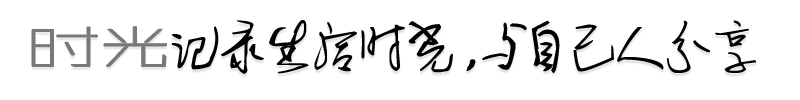
<style>
.page{position:relative;width:800px;height:100px;background:#ffffff}
.page>*{position:absolute;margin:0}
.t1{font:48px "ZHSRXT--GBK1-0";color:#797878;scale:1.52 1}
.t2{font:48px "-";color:#020202}
</style>
<div class="page">
<p class="t1" style="left:32px;top:26px;width:135px;height:41px">时光</p>
<p class="t2" style="left:171px;top:20px;width:585px;height:54px">记录生活时光，与自己人分享</p>
</div>
